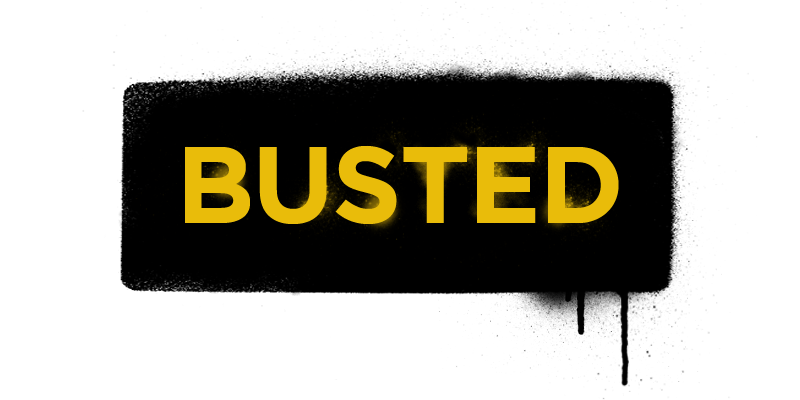
<style>
.page{position:relative;width:800px;height:400px;background:#ffffff}
.page>*{position:absolute;margin:0}
.t1{font:109px "GothamBold";letter-spacing:-0.02em;color:#e9bc0a}
</style>
<div class="page">
<p class="t1" style="left:185px;top:146px;width:434px;height:78px">BUSTED</p>
</div>
